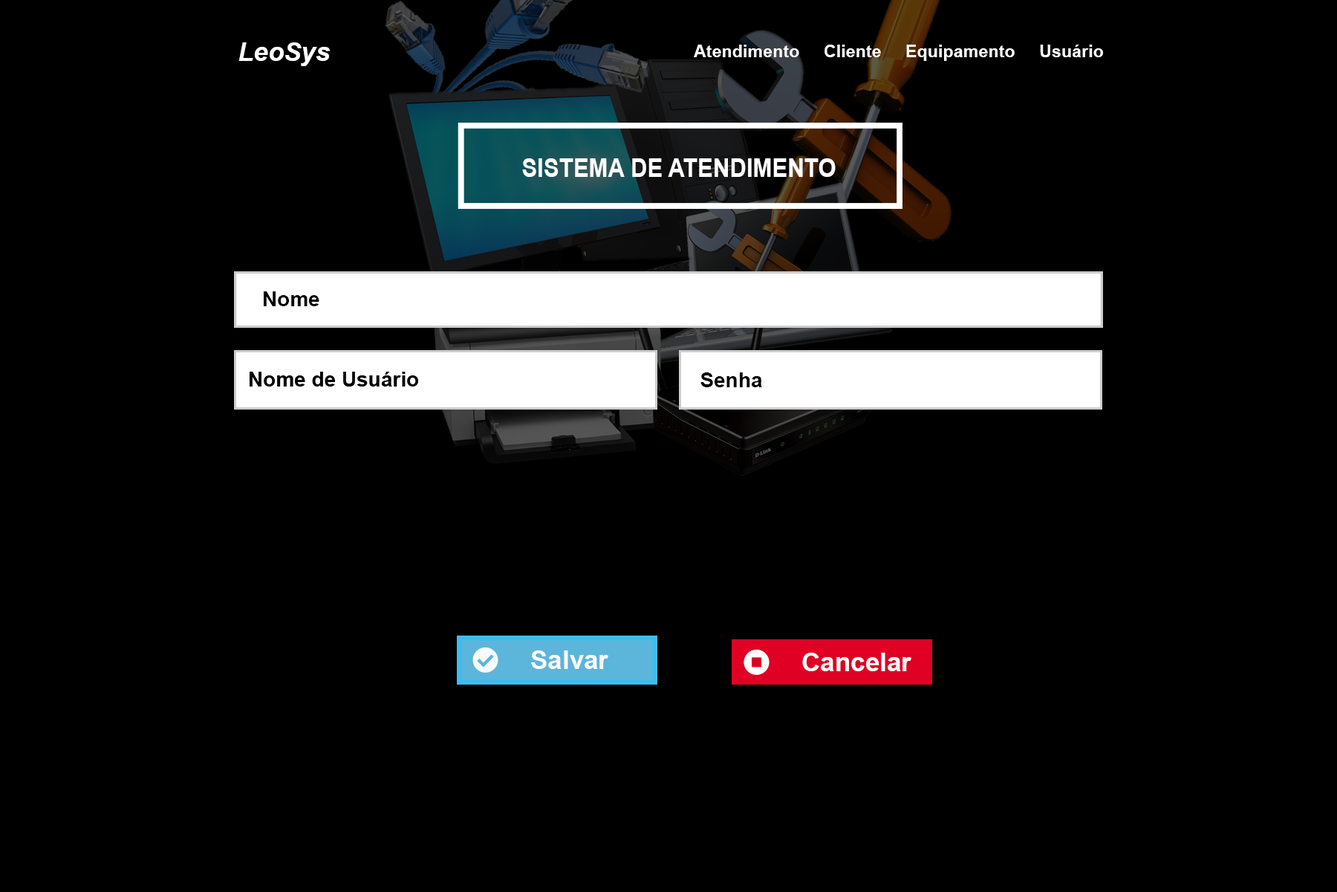
<style>
.page{position:relative;width:1337px;height:892px;background:#000000}
.page>*{position:absolute;margin:0}
.t1{font:44.6px "Arial-BoldItalicMT";color:#fffdfd}
.t2{font:29.7px "Arial-BoldMT";color:#fffdfd}
.t3{font:44.6px "Arial-BoldMT";color:#fffdfd;scale:0.89 1}
.t4{font:35.7px "Arial-BoldMT";color:#000000}
.t5{font:44.6px "Arial-BoldMT";color:#fafbfb}
</style>
<div class="page">
<p class="t1" style="left:239px;top:42px;width:92px;height:24px">LeoSys</p>
<p class="t2" style="left:694px;top:45px;width:409px;height:16px">Atendimento     Cliente     Equipamento     Usuário</p>
<p class="t3" style="left:522px;top:158px;width:314px;height:19px">SISTEMA DE ATENDIMENTO</p>
<p class="t4" style="left:264px;top:291px;width:55px;height:15px">Nome</p>
<p class="t4" style="left:701px;top:372px;width:61px;height:15px">Senha</p>
<p class="t5" style="left:531px;top:650px;width:78px;height:19px">Salvar</p>
<p class="t5" style="left:802px;top:652px;width:110px;height:19px">Cancelar</p>
</div>
